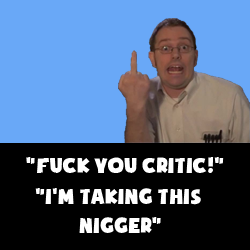
<style>
.page{position:relative;width:250px;height:250px;background:#69a8f7}
.page>*{position:absolute;margin:0}
.t1{font:24px "SoupofJustice";color:#ffffff}
</style>
<div class="page">
<p class="t1" style="left:26px;top:157px;width:198px;height:16px">"Fuck you critic!"</p>
<p class="t1" style="left:35px;top:188px;width:166px;height:45px;text-align:center">"I'm Taking this <br>Nigger"</p>
</div>
